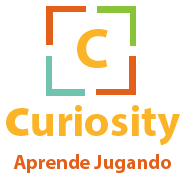
<style>
.page{position:relative;width:189px;height:184px;background:#ffffff}
.page>*{position:absolute;margin:0}
.t1{font:57.3px "MyriadPro-Bold";color:#fbb428}
.t2{font:44px "MyriadPro-Bold";color:#fbb428}
.t3{font:20px "MyriadPro-Bold";color:#e3601a}
</style>
<div class="page">
<p class="t1" style="left:77px;top:29px;width:31px;height:39px">C</p>
<p class="t2" style="left:6px;top:105px;width:174px;height:41px"><span class="t1">c</span>uriosity</p>
<p class="t3" style="left:13px;top:154px;width:158px;height:19px">Aprende Jugando</p>
</div>
